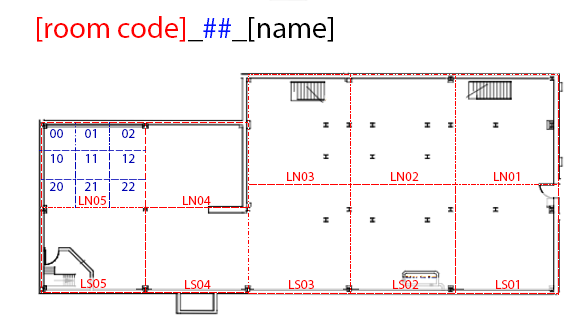
<style>
.page{position:relative;width:578px;height:319px;background:#ffffff}
.page>*{position:absolute;margin:0}
.t1{font:30px "MyriadPro-Regular";color:#ff0000}
.t2{font:30px "MyriadPro-Regular";color:#000000}
.t3{font:30px "MyriadPro-Regular";color:#0012ff}
.t4{font:13.3px "MyriadPro-Regular";color:#0004b4}
.t5{font:13.3px "MyriadPro-Regular";color:#ff0000}
</style>
<div class="page">
<p class="t1" style="left:37px;top:16px;width:296px;height:26px">[room code]<span class="t2">_</span><span class="t3">##</span><span class="t2">_[name]</span></p>
<p class="t4" style="left:50px;top:129px;width:13px;height:9px">00</p>
<p class="t4" style="left:85px;top:129px;width:11px;height:9px">01</p>
<p class="t4" style="left:122px;top:129px;width:13px;height:9px">02</p>
<p class="t4" style="left:51px;top:154px;width:12px;height:9px">10</p>
<p class="t4" style="left:86px;top:154px;width:10px;height:9px">11</p>
<p class="t4" style="left:123px;top:154px;width:12px;height:9px">12</p>
<p class="t5" style="left:287px;top:172px;width:27px;height:9px">LN03</p>
<p class="t5" style="left:391px;top:172px;width:28px;height:9px">LN02</p>
<p class="t5" style="left:494px;top:172px;width:26px;height:9px">LN01</p>
<p class="t4" style="left:49px;top:182px;width:14px;height:9px">20</p>
<p class="t4" style="left:84px;top:182px;width:12px;height:9px">21</p>
<p class="t4" style="left:121px;top:182px;width:14px;height:9px">22</p>
<p class="t5" style="left:79px;top:196px;width:27px;height:9px">LN05</p>
<p class="t5" style="left:183px;top:196px;width:28px;height:9px">LN04</p>
<p class="t5" style="left:81px;top:279px;width:25px;height:9px">LS05</p>
<p class="t5" style="left:185px;top:280px;width:26px;height:9px">LS04</p>
<p class="t5" style="left:289px;top:280px;width:25px;height:9px">LS03</p>
<p class="t5" style="left:393px;top:280px;width:26px;height:9px">LS02</p>
<p class="t5" style="left:496px;top:280px;width:23px;height:9px">LS01</p>
</div>
